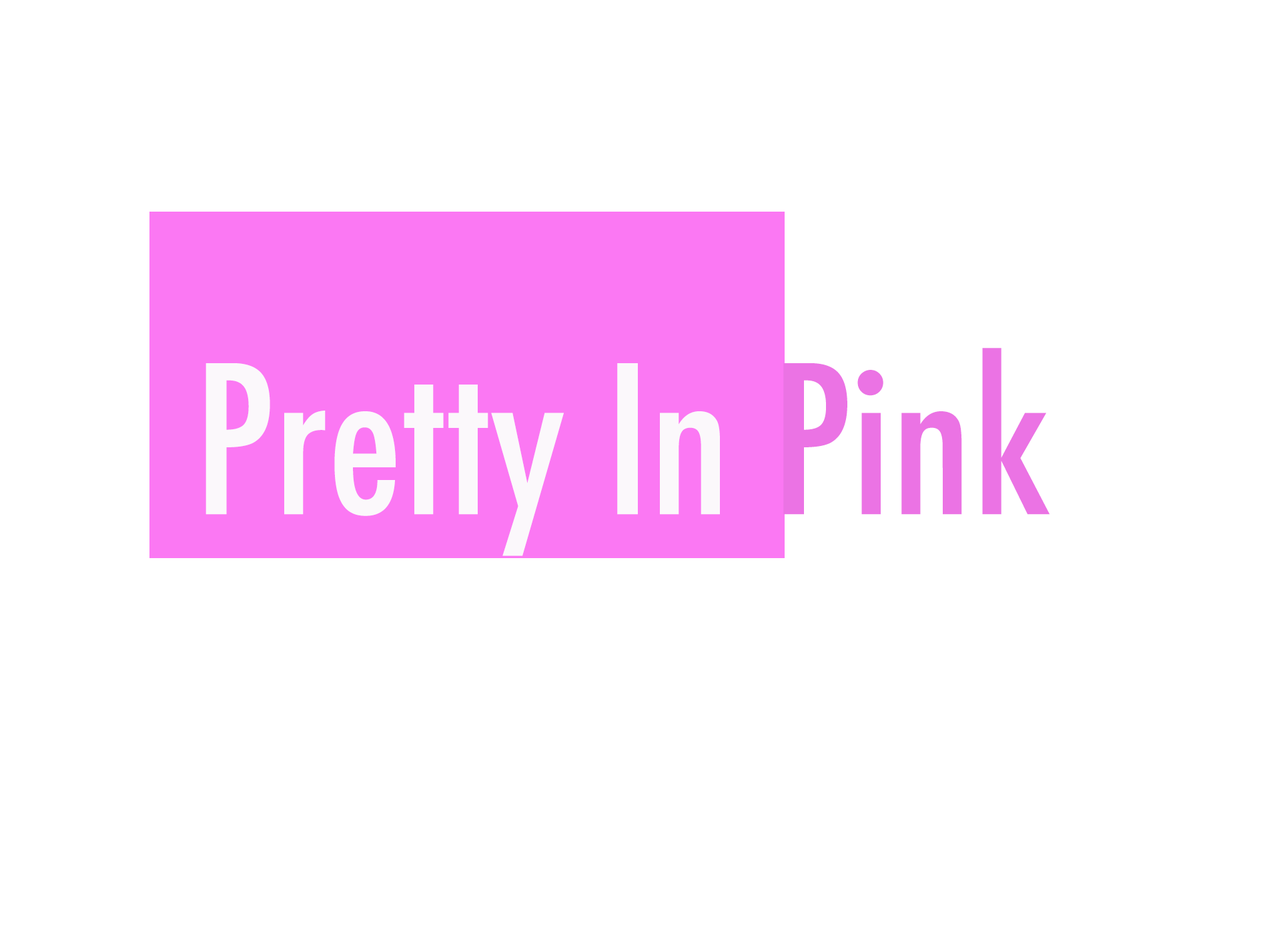
<style>
.page{position:relative;width:1261px;height:946px;background:#ffffff}
.page>*{position:absolute;margin:0}
.t1{font:200.2px "Futura-CondensedMedium";color:#fbf8fb}
.t2{font:200.2px "Futura-CondensedMedium";color:#eb73e4}
</style>
<div class="page">
<p class="t1" style="left:206px;top:348px;width:844px;height:208px">Pretty In<span class="t2"> Pink</span></p>
</div>
